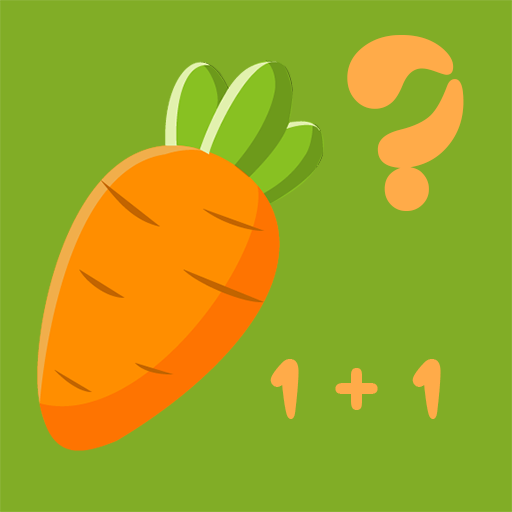
<style>
.page{position:relative;width:512px;height:512px;background:#81ad26}
.page>*{position:absolute;margin:0}
.t1{font:256px "UVNBanhMi";color:#ffab49}
.t2{font:87px "UVNBanhMi";color:#ffab49}
</style>
<div class="page">
<p class="t1" style="left:347px;top:35px;width:117px;height:176px">?</p>
<p class="t2" style="left:270px;top:359px;width:171px;height:60px">1 + 1</p>
</div>
